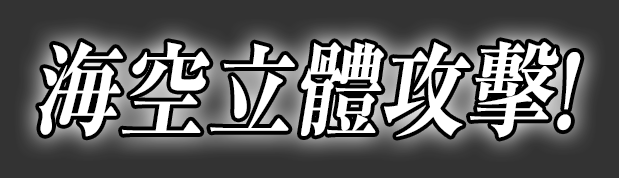
<style>
.page{position:relative;width:619px;height:178px;background:#333333}
.page>*{position:absolute;margin:0}
.t1{font:102px "RyuminPr6N-ExBold";color:#ffffff;font-style:italic;scale:0.85 1}
</style>
<div class="page">
<p class="t1" style="left:39px;top:41px;width:542px;height:97px">海空立體攻擊!</p>
</div>
